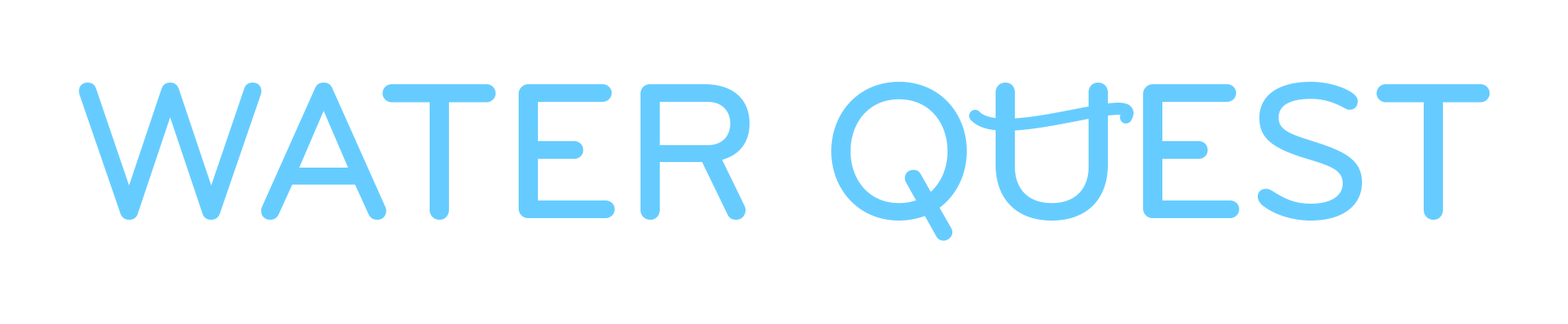
<style>
.page{position:relative;width:1568px;height:324px;background:#ffffff}
.page>*{position:absolute;margin:0}
.t1{font:200.4px "Bryant-Medium";color:#66ccff}
</style>
<div class="page">
<p class="t1" style="left:79px;top:82px;width:1411px;height:158px">WATER QUEST</p>
</div>
